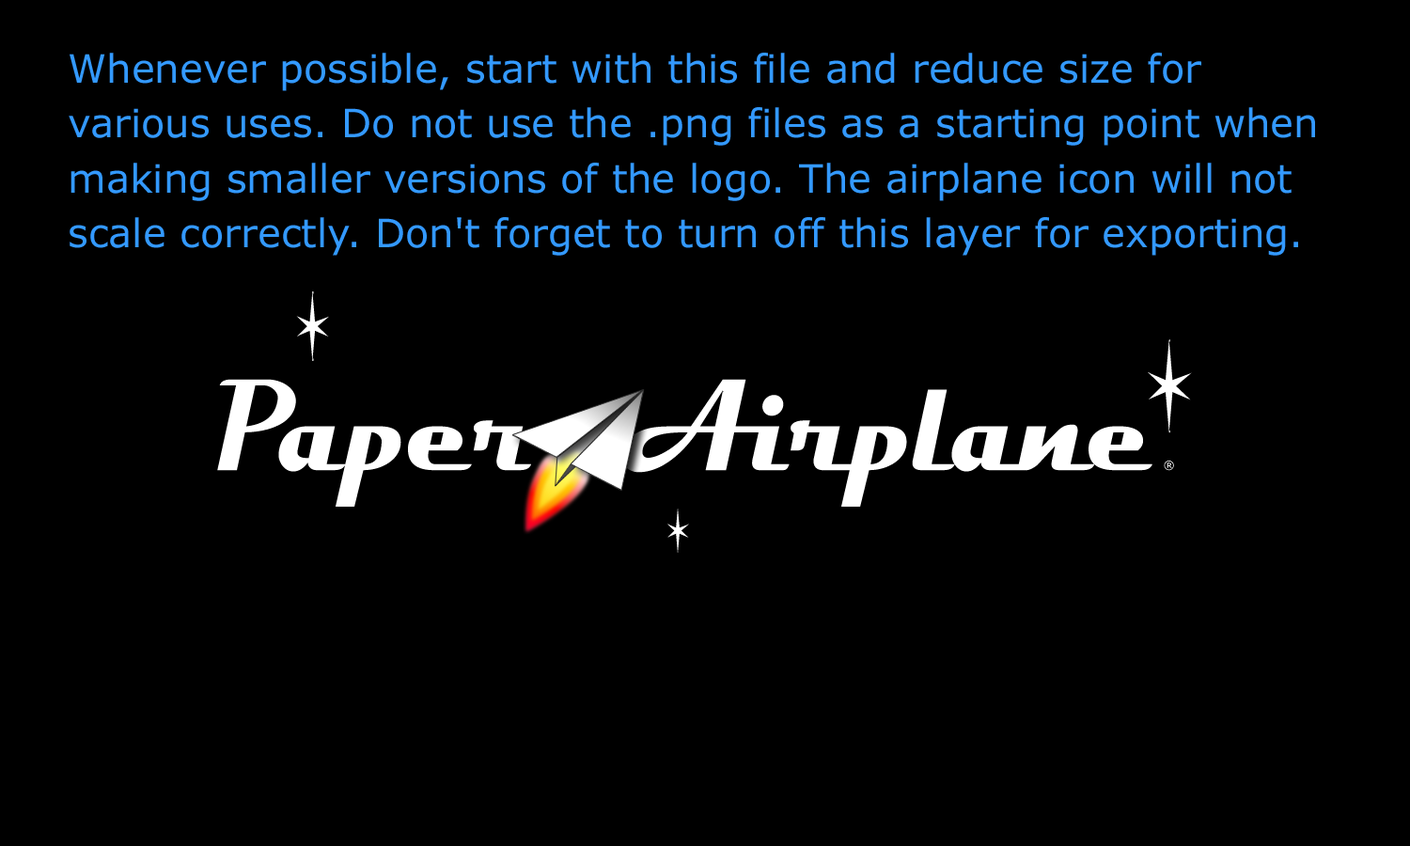
<style>
.page{position:relative;width:1410px;height:846px;background:#000000}
.page>*{position:absolute;margin:0}
.t1{font:39.2px/54.8px "Verdana";color:#3399ff}
</style>
<div class="page">
<p class="t1" style="left:69px;top:53px;width:1246px;height:203px">Whenever possible, start with this file and reduce size for<br>various uses. Do not use the .png files as a starting point when<br>making smaller versions of the logo. The airplane icon will not<br>scale correctly. Don't forget to turn off this layer for exporting.</p>
</div>
